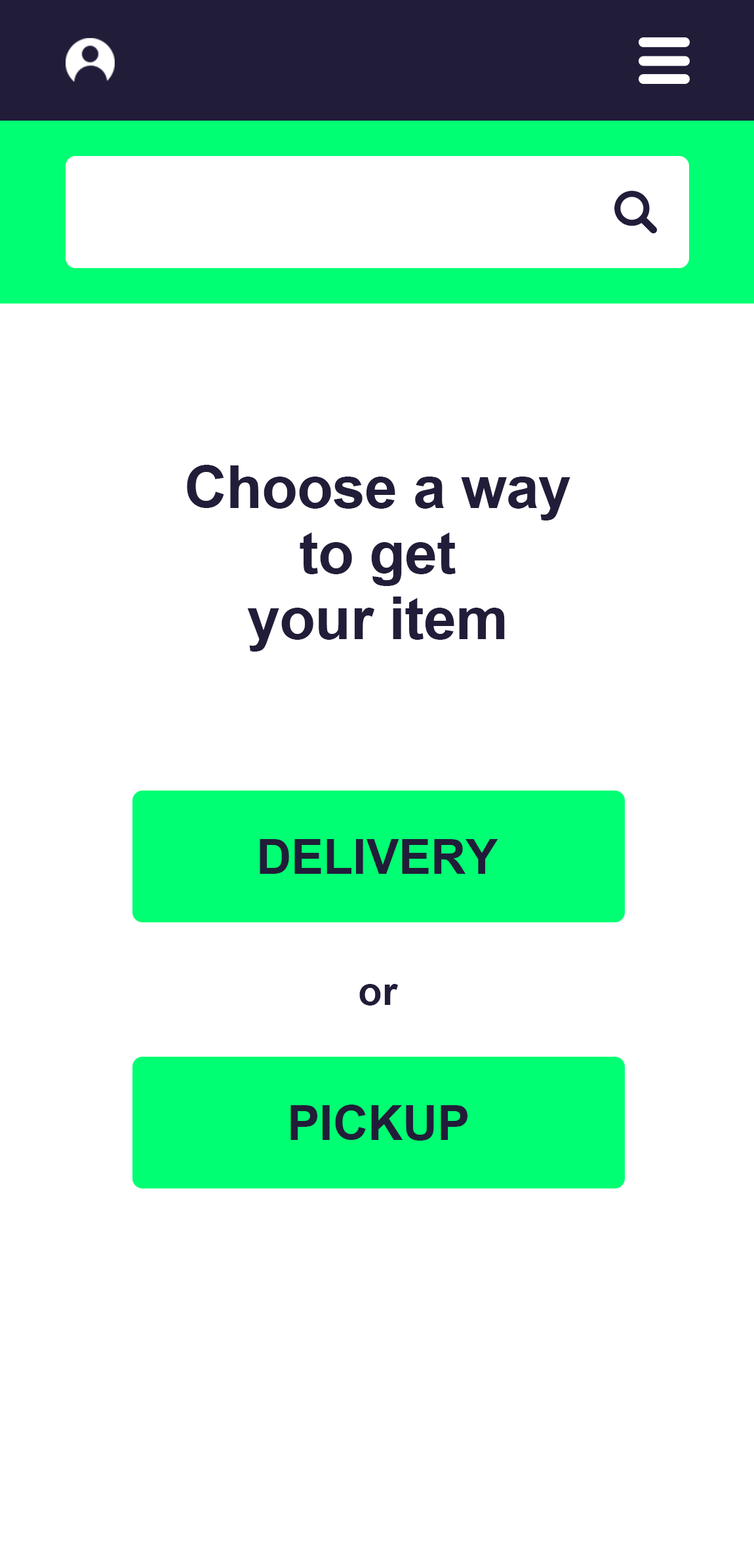
<style>
.page{position:relative;width:754px;height:1568px;background:#ffffff}
.page>*{position:absolute;margin:0}
.t1{font:59px/65.6px "Arial-BoldMT";letter-spacing:-0.01em;color:#211d39}
.t2{font:48.2px "Arial-BoldMT";color:#211d39}
.t3{font:39.3px "Arial-BoldMT";color:#211d39}
</style>
<div class="page">
<p class="t1" style="left:187px;top:465px;width:383px;height:187px;text-align:center">Choose a way<br>to get<br>your item</p>
<p class="t2" style="left:260px;top:839px;width:238px;height:35px">DELIVERY</p>
<p class="t3" style="left:359px;top:984px;width:39px;height:22px">or</p>
<p class="t2" style="left:290px;top:1105px;width:177px;height:36px">PICKUP</p>
</div>
